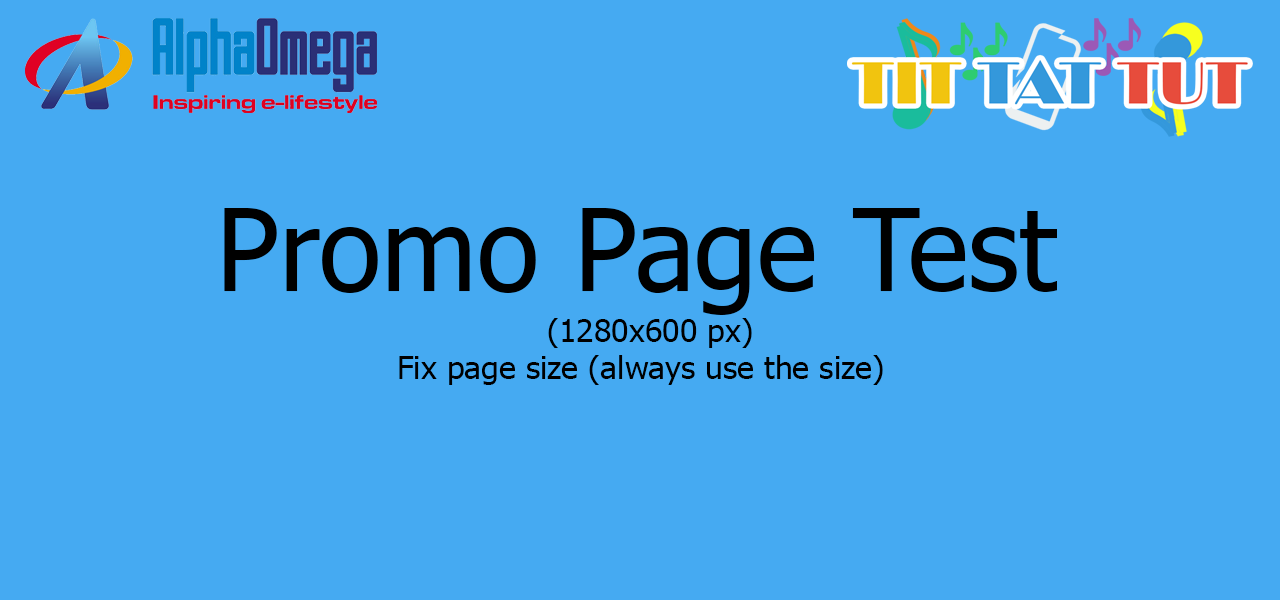
<style>
.page{position:relative;width:1280px;height:600px;background:#45aaf2}
.page>*{position:absolute;margin:0}
.t1{font:114px "Tahoma";color:#000000}
.t2{font:32px "Tahoma";color:#000000}
</style>
<div class="page">
<p class="t1" style="left:224px;top:208px;width:833px;height:107px">Promo Page Test</p>
<p class="t2" style="left:548px;top:318px;width:204px;height:30px">(1280x600 px)</p>
<p class="t2" style="left:399px;top:355px;width:484px;height:30px">Fix page size (always use the size)</p>
</div>
